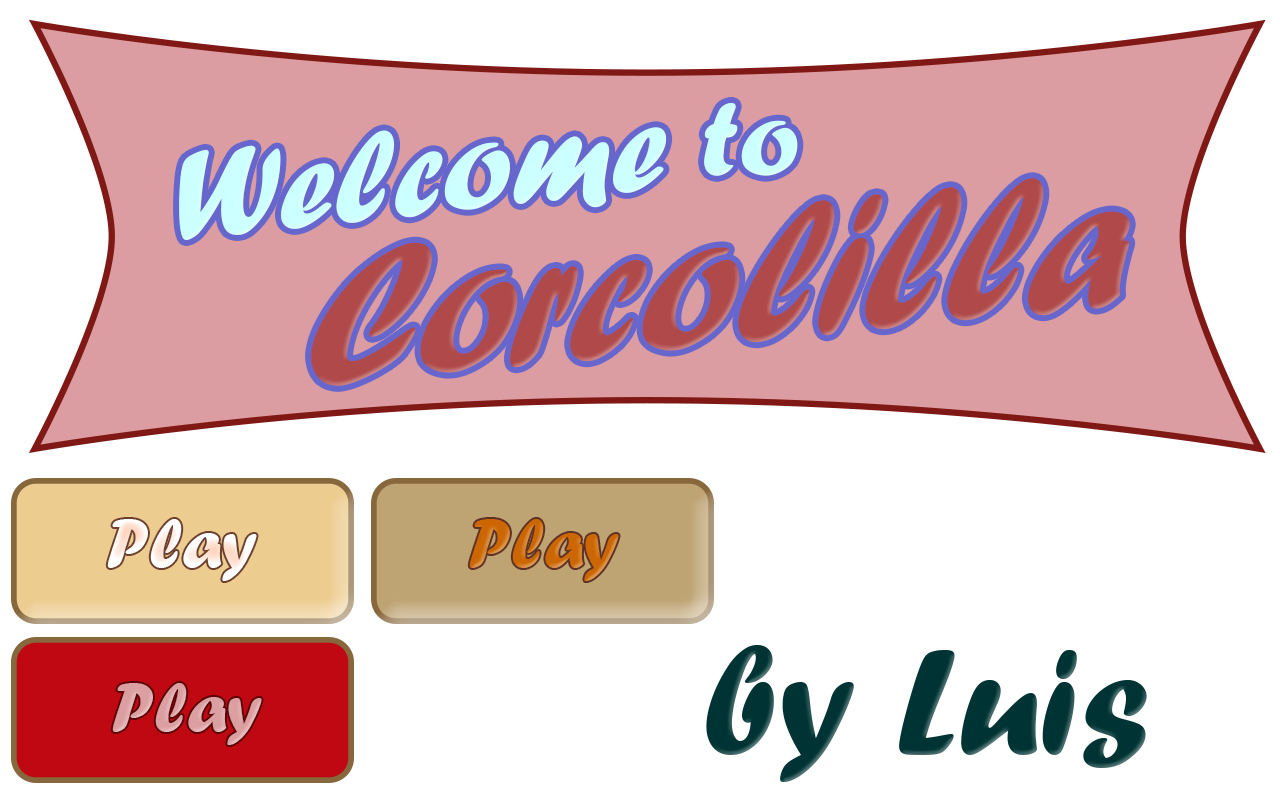
<style>
.page{position:relative;width:1280px;height:800px;background:#ffffff}
.page>*{position:absolute;margin:0}
.t1{font:111.6px "ForteMT";color:#ccffff}
.t2{font:133.1px "ForteMT";color:#ccffff}
.t3{font:210px "ForteMT";color:#b04a4a;scale:0.86 1}
.t4{font:72px "ForteMT";color:#fff6f2}
.t5{font:72px "ForteMT";color:#cc6600}
.t6{font:156.3px "ForteMT";color:#003333}
.t7{font:72px "ForteMT";color:#db9ea1}
</style>
<div class="page">
<p class="t1" style="left:704px;top:102px;width:94px;height:74px;rotate:-1deg">to</p>
<p class="t2" style="left:179px;top:127px;width:488px;height:113px;rotate:-6deg">Welcome</p>
<p class="t3" style="left:311px;top:178px;width:819px;height:208px;rotate:-6deg">Corcolilla</p>
<p class="t4" style="left:107px;top:519px;width:150px;height:62px">Play</p>
<p class="t5" style="left:469px;top:519px;width:150px;height:62px">Play</p>
<p class="t6" style="left:706px;top:645px;width:441px;height:137px">by Luis</p>
<p class="t7" style="left:112px;top:683px;width:150px;height:62px">Play</p>
</div>
